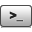
<style>
.page{position:relative;width:32px;height:32px;background:#ffffff}
.page>*{position:absolute;margin:0}
.t1{font:12px "Arial-Black";letter-spacing:-0.025em;color:#232323}
</style>
<div class="page">
<p class="t1" style="left:9px;top:11px;width:14px;height:11px">&gt;_</p>
</div>
